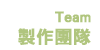
<style>
.page{position:relative;width:100px;height:50px;background:#ffffff}
.page>*{position:absolute;margin:0}
.t1{font:14px "DFNHei-XB-HKP-BF";color:#b0c57e;font-weight:bold}
.t2{font:18px "DFNHei-XB-HKP-BF";color:#b0c57e;font-weight:bold}
</style>
<div class="page">
<p class="t1" style="left:55px;top:11px;width:36px;height:12px">Team</p>
<p class="t2" style="left:18px;top:28px;width:73px;height:17px">製作團隊</p>
</div>
